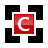
<style>
.page{position:relative;width:48px;height:48px;background:#ffffff}
.page>*{position:absolute;margin:0}
.t1{font:20.8px "LucidaConsole";color:#ffffff;font-weight:bold}
</style>
<div class="page">
<p class="t1" style="left:18px;top:17px;width:12px;height:15px">C</p>
</div>
